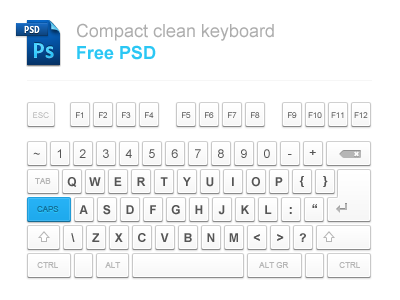
<style>
.page{position:relative;width:400px;height:300px;background:#ffffff}
.page>*{position:absolute;margin:0}
.t1{font:18px "ArialMT";color:#adadad}
.t2{font:18px "Arial-BoldMT";color:#2bc7f4}
.t3{font:8px "ArialMT";color:#b6b6b6;text-transform:uppercase}
.t4{font:8px "ArialMT";color:#555555;text-transform:uppercase}
.t5{font:8px "ArialMT";text-transform:uppercase}
.t6{font:12px "ArialMT";color:#555555;text-transform:uppercase}
.t7{font:12px "Arial-BoldMT";color:#555555;text-transform:uppercase}
.t8{font:8px "ArialMT";color:#136f9c;text-transform:uppercase}
.t9{font:8px "ArialMT";color:#197dae;text-transform:uppercase}
</style>
<div class="page">
<p class="t1" style="left:77px;top:23px;width:197px;height:37px">Compact clean keyboard<br><span class="t2">Free PSD</span></p>
<p class="t3" style="left:33px;top:112px;width:16px;height:6px">esc</p>
<p class="t4" style="left:76px;top:112px;width:7px;height:6px">F1</p>
<p class="t5" style="left:99px;top:112px;width:8px;height:6px">F2</p>
<p class="t5" style="left:122px;top:112px;width:9px;height:6px">F3</p>
<p class="t5" style="left:145px;top:112px;width:9px;height:6px">F4</p>
<p class="t5" style="left:182px;top:112px;width:9px;height:6px">F5</p>
<p class="t5" style="left:205px;top:112px;width:9px;height:6px">F6</p>
<p class="t5" style="left:228px;top:112px;width:9px;height:6px">F7</p>
<p class="t5" style="left:251px;top:112px;width:9px;height:6px">F8</p>
<p class="t5" style="left:288px;top:112px;width:9px;height:6px">F9</p>
<p class="t5" style="left:308px;top:112px;width:14px;height:6px">F10</p>
<p class="t5" style="left:331px;top:112px;width:13px;height:6px">F11</p>
<p class="t4" style="left:354px;top:112px;width:14px;height:6px">F12</p>
<p class="t6" style="left:57px;top:149px;width:4px;height:9px">1</p>
<p class="t6" style="left:79px;top:149px;width:7px;height:9px">2</p>
<p class="t6" style="left:103px;top:149px;width:6px;height:9px">3</p>
<p class="t6" style="left:125px;top:149px;width:7px;height:9px">4</p>
<p class="t6" style="left:149px;top:149px;width:6px;height:9px">5</p>
<p class="t6" style="left:171px;top:149px;width:7px;height:9px">6</p>
<p class="t6" style="left:195px;top:149px;width:6px;height:9px">7</p>
<p class="t6" style="left:218px;top:149px;width:6px;height:9px">8</p>
<p class="t6" style="left:241px;top:149px;width:6px;height:9px">9</p>
<p class="t6" style="left:264px;top:149px;width:6px;height:9px">0</p>
<p class="t6" style="left:309px;top:150px;width:7px;height:5px">+</p>
<p class="t6" style="left:33px;top:152px;width:7px;height:3px">~</p>
<p class="t6" style="left:288px;top:154px;width:4px;height:1px">-</p>
<p class="t3" style="left:35px;top:178px;width:16px;height:6px">tab</p>
<p class="t7" style="left:67px;top:177px;width:10px;height:10px">q</p>
<p class="t7" style="left:89px;top:177px;width:12px;height:9px">w</p>
<p class="t7" style="left:114px;top:177px;width:8px;height:9px">e</p>
<p class="t7" style="left:137px;top:177px;width:9px;height:9px">r</p>
<p class="t7" style="left:160px;top:177px;width:8px;height:9px">t</p>
<p class="t7" style="left:183px;top:177px;width:8px;height:9px">y</p>
<p class="t7" style="left:206px;top:177px;width:8px;height:10px">u</p>
<p class="t7" style="left:232px;top:177px;width:2px;height:9px">I</p>
<p class="t7" style="left:251px;top:177px;width:9px;height:10px">o</p>
<p class="t7" style="left:275px;top:177px;width:8px;height:9px">p</p>
<p class="t7" style="left:299px;top:176px;width:5px;height:11px">{</p>
<p class="t7" style="left:323px;top:176px;width:5px;height:11px">}</p>
<p class="t8" style="left:37px;top:206px;width:22px;height:6px">caps</p>
<p class="t9" style="left:37px;top:206px;width:22px;height:6px">caps</p>
<p class="t7" style="left:79px;top:205px;width:9px;height:9px">a</p>
<p class="t7" style="left:103px;top:205px;width:8px;height:10px">s</p>
<p class="t7" style="left:126px;top:205px;width:8px;height:9px">d</p>
<p class="t7" style="left:150px;top:205px;width:6px;height:9px">f</p>
<p class="t7" style="left:171px;top:205px;width:9px;height:10px">g</p>
<p class="t7" style="left:195px;top:205px;width:8px;height:9px">h</p>
<p class="t7" style="left:218px;top:205px;width:7px;height:10px">j</p>
<p class="t7" style="left:241px;top:205px;width:8px;height:9px">k</p>
<p class="t7" style="left:265px;top:205px;width:7px;height:9px">l</p>
<p class="t7" style="left:289px;top:207px;width:3px;height:7px">:</p>
<p class="t7" style="left:312px;top:204px;width:5px;height:4px">“</p>
<p class="t7" style="left:71px;top:233px;width:4px;height:9px">\</p>
<p class="t7" style="left:92px;top:233px;width:8px;height:9px">z</p>
<p class="t7" style="left:115px;top:233px;width:8px;height:9px">x</p>
<p class="t7" style="left:138px;top:233px;width:8px;height:9px">c</p>
<p class="t7" style="left:160px;top:233px;width:9px;height:9px">v</p>
<p class="t7" style="left:184px;top:233px;width:8px;height:9px">b</p>
<p class="t7" style="left:207px;top:233px;width:8px;height:9px">n</p>
<p class="t7" style="left:229px;top:233px;width:9px;height:9px">m</p>
<p class="t7" style="left:299px;top:233px;width:7px;height:9px">?</p>
<p class="t7" style="left:253px;top:234px;width:7px;height:7px">&lt;</p>
<p class="t7" style="left:277px;top:234px;width:7px;height:7px">&gt;</p>
<p class="t3" style="left:37px;top:262px;width:21px;height:6px">ctrl</p>
<p class="t3" style="left:105px;top:262px;width:16px;height:6px">alt</p>
<p class="t3" style="left:259px;top:262px;width:30px;height:6px">alt gr</p>
<p class="t3" style="left:339px;top:262px;width:21px;height:6px">ctrl</p>
</div>
